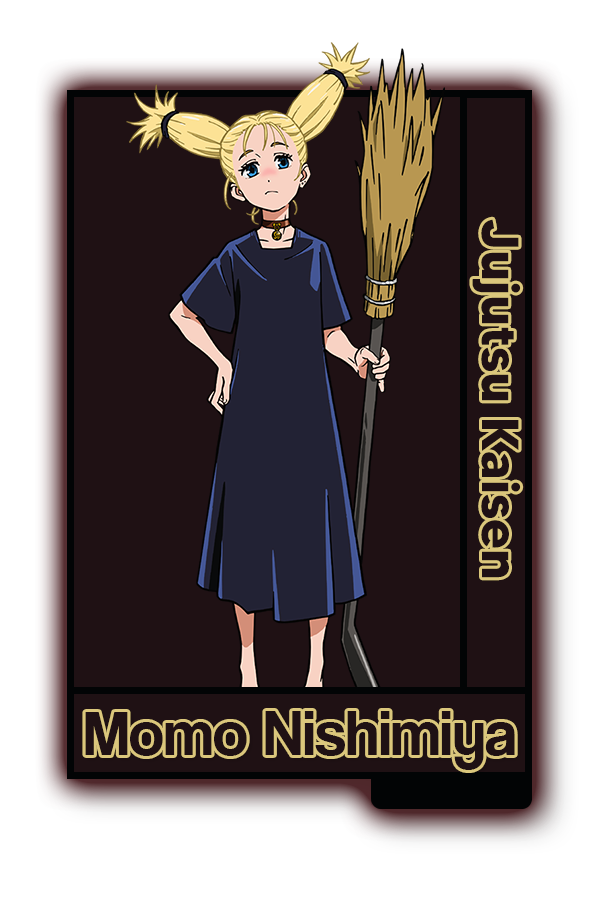
<style>
.page{position:relative;width:600px;height:900px;background:#1f1114}
.page>*{position:absolute;margin:0}
.t1{font:52px "MADETOMMY-Bold";color:#1e1214}
.t2{font:65.2px "CoolveticaRg-Regular";color:#1e1214}
</style>
<div class="page">
<p class="t1" style="left:472px;top:219px;width:49px;height:359px;rotate:90deg">Jujutsu Kaisen</p>
<p class="t2" style="left:85px;top:711px;width:430px;height:59px">Momo Nishimiya</p>
</div>
